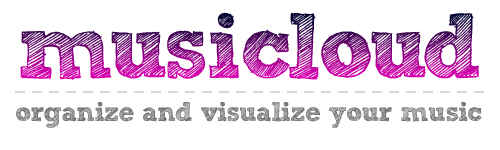
<style>
.page{position:relative;width:500px;height:150px;background:#ffffff}
.page>*{position:absolute;margin:0}
.t1{font:92.3px "SketchRockwell"}
.t2{font:27px "SketchRockwell";letter-spacing:-0.03em;color:#666666}
</style>
<div class="page">
<p class="t1" style="left:20px;top:12px;width:459px;height:68px">musicloud</p>
<p class="t2" style="left:16px;top:102px;width:466px;height:26px">organize and visualize your music</p>
</div>
